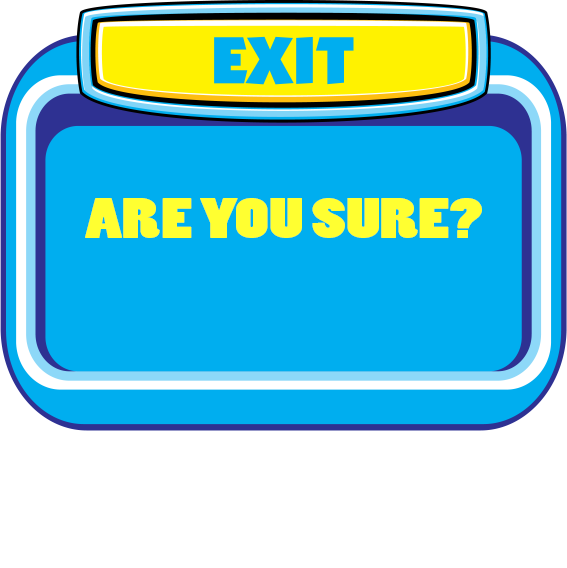
<style>
.page{position:relative;width:567px;height:568px;background:#00aeef}
.page>*{position:absolute;margin:0}
.t1{font:54px "PoplarStd";color:#ffff31;scale:1.4 1}
</style>
<div class="page">
<p class="t1" style="left:85px;top:198px;width:397px;height:40px">ARE YOU SURE?</p>
</div>
